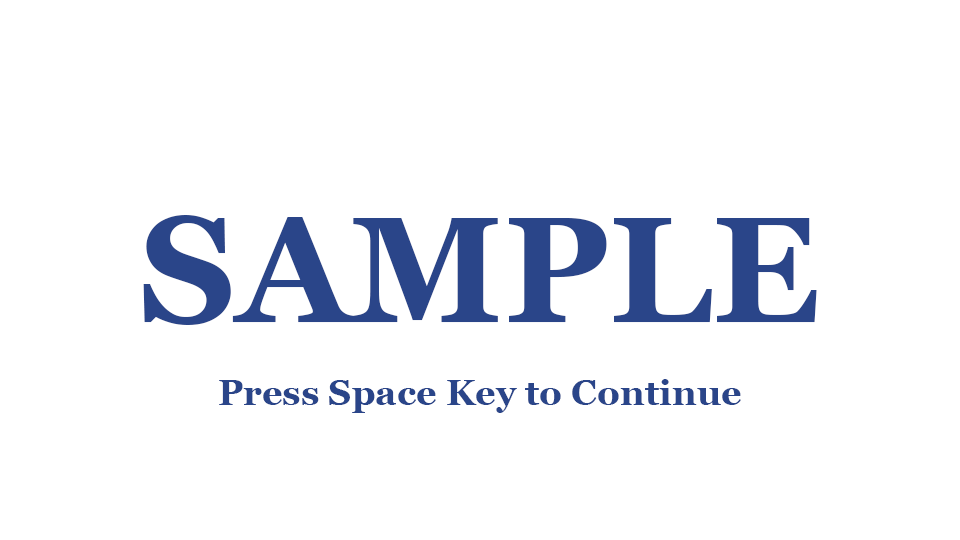
<style>
.page{position:relative;width:960px;height:540px;background:#ffffff}
.page>*{position:absolute;margin:0}
.t1{font:150px "Georgia-Bold";color:#2a4589}
.t2{font:36px "Georgia-Bold";color:#2a4589}
</style>
<div class="page">
<p class="t1" style="left:143px;top:215px;width:674px;height:110px">SAMPLE</p>
<p class="t2" style="left:219px;top:379px;width:522px;height:34px">Press Space Key to Continue</p>
</div>
